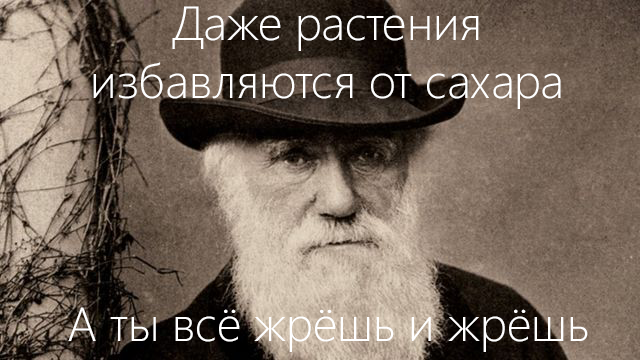
<style>
.page{position:relative;width:640px;height:360px}
.page>*{position:absolute;margin:0}
.t1{font:48px "SegoeUI-Light";color:#ffffff}
</style>
<div class="page">
<p class="t1" style="left:93px;top:6px;width:468px;height:103px;text-align:center">Даже растения<br>избавляются от сахара</p>
<p class="t1" style="left:68px;top:307px;width:520px;height:45px">А ты всё жрёшь и жрёшь</p>
</div>
